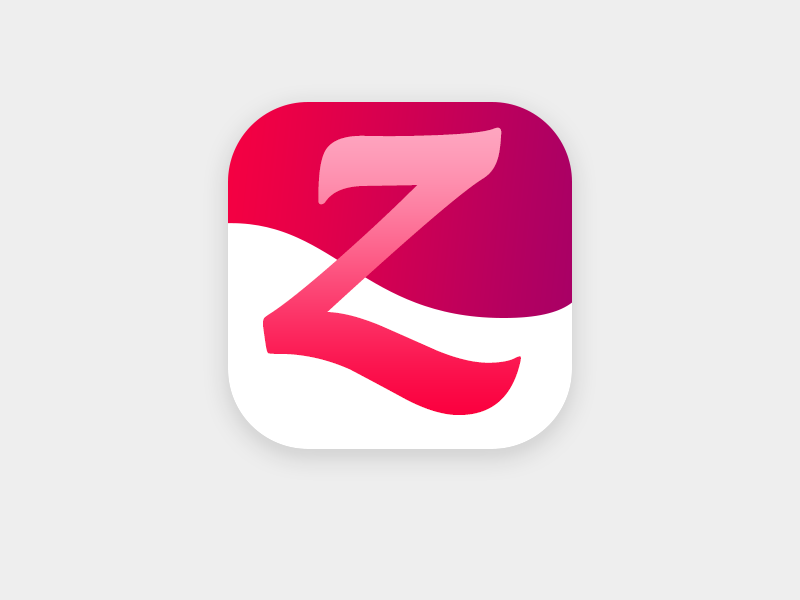
<style>
.page{position:relative;width:800px;height:600px;background:#eeeeee}
.page>*{position:absolute;margin:0}
.t1{font:300px "TartineScriptBlack"}
</style>
<div class="page">
<p class="t1" style="left:263px;top:127px;width:258px;height:288px">Z</p>
</div>
